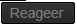
<style>
.page{position:relative;width:77px;height:26px}
.page>*{position:absolute;margin:0}
.t1{font:14px "ArialMT";color:#7a7a7a}
</style>
<div class="page">
<p class="t1" style="left:10px;top:8px;width:54px;height:13px">Reageer</p>
</div>
